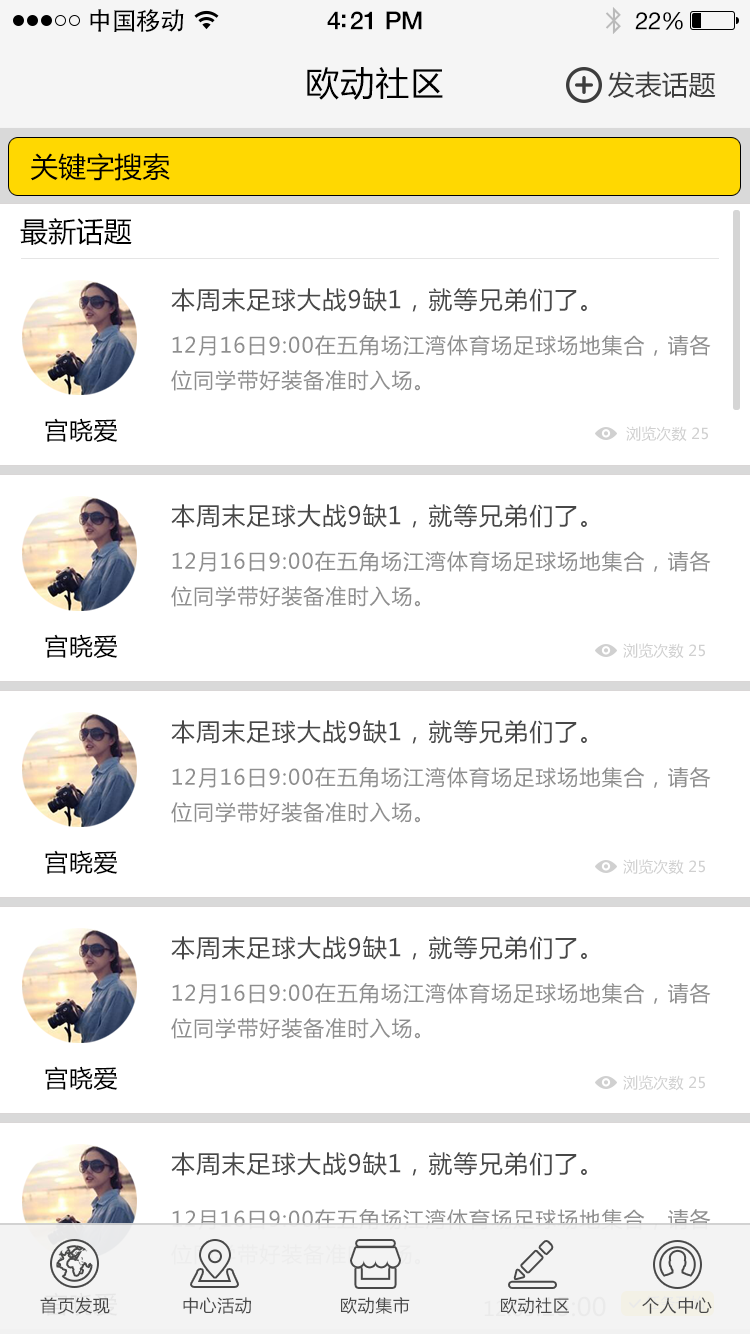
<style>
.page{position:relative;width:750px;height:1334px;background:#ffffff}
.page>*{position:absolute;margin:0}
.t1{font:25px "AdobeHeitiStd-Regular";letter-spacing:-0.025em;color:#000000}
.t2{font:25px "HelveticaNeue-Medium";letter-spacing:-0.02em;color:#000000}
.t3{font:24px "HelveticaNeue";letter-spacing:-0.02em;color:#000000}
.t4{font:34px "MicrosoftYaHei";letter-spacing:0.03em;color:#000000}
.t5{font:27px "MicrosoftYaHei";color:#3d3d3d}
.t6{font:28px "MicrosoftYaHei";color:#000000}
.t7{font:24px "MicrosoftYaHei";letter-spacing:0.05em;color:#555555}
.t8{font:21px/35px "MicrosoftYaHei";letter-spacing:0.05em;color:#8e8e8e}
.t9{font:24px "MicrosoftYaHei";letter-spacing:0.03em;color:#000000}
.t10{font:15px "MicrosoftYaHei";letter-spacing:0.01em;color:#d0d0d0}
.t11{font:21px/35px "MicrosoftYaHei";letter-spacing:0.05em}
.t12{font:17px "MicrosoftYaHei";letter-spacing:0.03em;color:#484848}
</style>
<div class="page">
<p class="t1" style="left:90px;top:9px;width:94px;height:23px">中国移动</p>
<p class="t2" style="left:327px;top:11px;width:95px;height:19px">4:21 PM</p>
<p class="t3" style="left:635px;top:12px;width:48px;height:18px">22%</p>
<p class="t4" style="left:307px;top:67px;width:136px;height:33px">欧动社区</p>
<p class="t5" style="left:608px;top:71px;width:108px;height:27px">发表话题</p>
<p class="t6" style="left:31px;top:153px;width:139px;height:28px">关键字搜索</p>
<p class="t6" style="left:20px;top:218px;width:112px;height:27px">最新话题</p>
<p class="t7" style="left:171px;top:288px;width:416px;height:24px">本周末足球大战9缺1，就等兄弟们了。</p>
<p class="t8" style="left:171px;top:335px;width:540px;height:56px">12月16日9:00在五角场江湾体育场足球场地集合，请各<br>位同学带好装备准时入场。</p>
<p class="t9" style="left:45px;top:418px;width:73px;height:24px">宫晓爱</p>
<p class="t10" style="left:626px;top:426px;width:82px;height:16px">浏览次数 25</p>
<p class="t7" style="left:171px;top:504px;width:416px;height:24px">本周末足球大战9缺1，就等兄弟们了。</p>
<p class="t8" style="left:171px;top:551px;width:540px;height:56px">12月16日9:00在五角场江湾体育场足球场地集合，请各<br>位同学带好装备准时入场。</p>
<p class="t9" style="left:45px;top:634px;width:73px;height:24px">宫晓爱</p>
<p class="t10" style="left:623px;top:643px;width:82px;height:16px">浏览次数 25</p>
<p class="t7" style="left:171px;top:720px;width:416px;height:24px">本周末足球大战9缺1，就等兄弟们了。</p>
<p class="t8" style="left:171px;top:767px;width:540px;height:56px">12月16日9:00在五角场江湾体育场足球场地集合，请各<br>位同学带好装备准时入场。</p>
<p class="t9" style="left:45px;top:850px;width:73px;height:24px">宫晓爱</p>
<p class="t10" style="left:623px;top:859px;width:82px;height:16px">浏览次数 25</p>
<p class="t7" style="left:171px;top:936px;width:416px;height:24px">本周末足球大战9缺1，就等兄弟们了。</p>
<p class="t8" style="left:171px;top:983px;width:540px;height:56px">12月16日9:00在五角场江湾体育场足球场地集合，请各<br>位同学带好装备准时入场。</p>
<p class="t9" style="left:45px;top:1066px;width:73px;height:24px">宫晓爱</p>
<p class="t10" style="left:623px;top:1075px;width:82px;height:16px">浏览次数 25</p>
<p class="t7" style="left:171px;top:1152px;width:416px;height:24px">本周末足球大战9缺1，就等兄弟们了。</p>
<p class="t11" style="left:171px;top:1209px;width:540px;height:56px">12月16日9:00在五角场江湾体育场足球场地集合，请各<br>位同学带好装备准时入场。</p>
<p class="t12" style="left:40px;top:1297px;width:70px;height:17px">首页发现</p>
<p class="t12" style="left:183px;top:1297px;width:68px;height:17px">中心活动</p>
<p class="t12" style="left:341px;top:1297px;width:69px;height:17px">欧动集市</p>
<p class="t12" style="left:501px;top:1297px;width:68px;height:17px">欧动社区</p>
<p class="t12" style="left:642px;top:1297px;width:70px;height:17px">个人中心</p>
</div>
